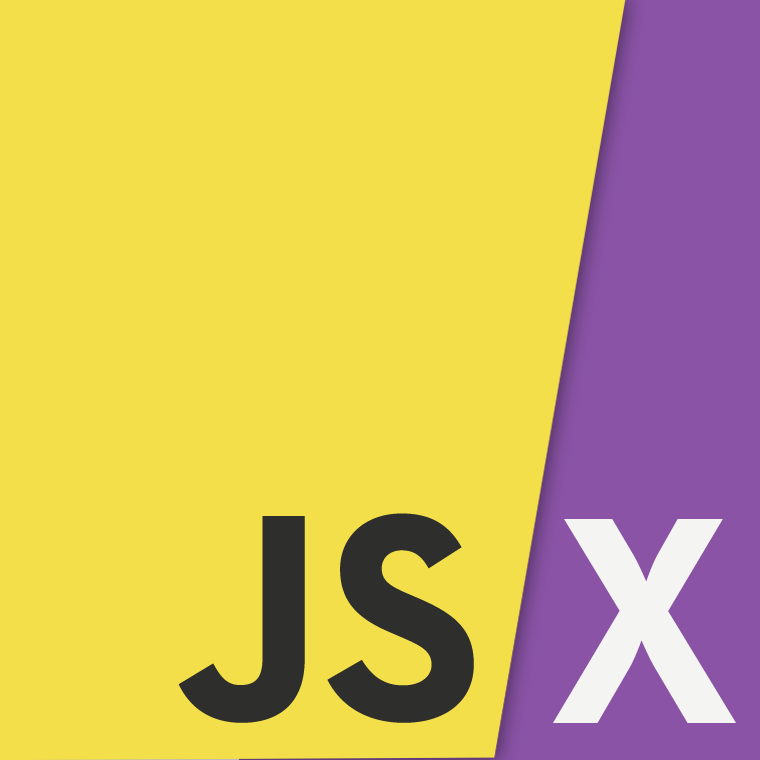
<style>
.page{position:relative;width:760px;height:760px;background:#f3df49}
.page>*{position:absolute;margin:0}
.t1{font:300px "NeutraText-Bold";color:#2e2e2c}
.t2{font:300px "NeutraText-Bold";color:#f4f4f3}
</style>
<div class="page">
<p class="t1" style="left:178px;top:513px;width:296px;height:210px">JS</p>
<p class="t2" style="left:553px;top:519px;width:183px;height:204px">X</p>
</div>
